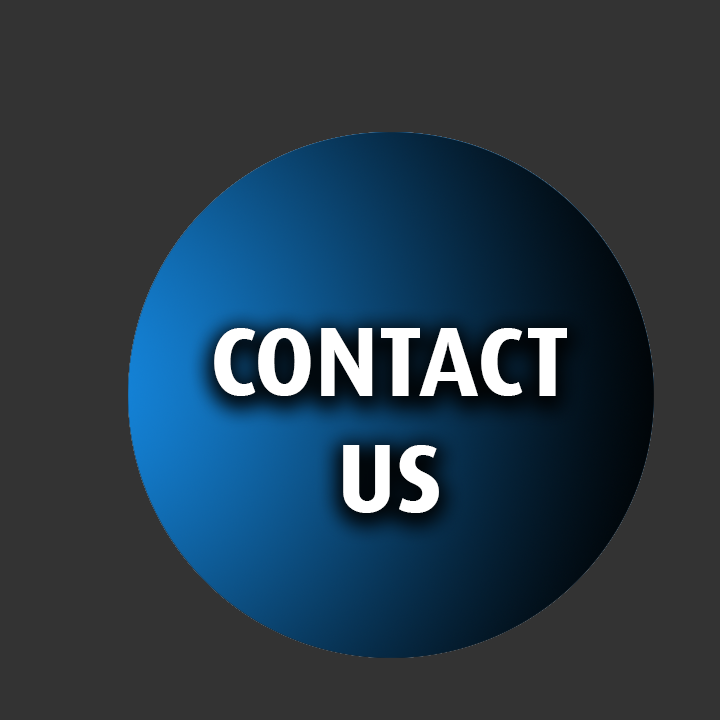
<style>
.page{position:relative;width:720px;height:720px;background:#333333}
.page>*{position:absolute;margin:0}
.t1{font:97px "DaxBold";color:#ffffff}
</style>
<div class="page">
<p class="t1" style="left:214px;top:328px;width:353px;height:185px;text-align:center">CONTACT<br>US</p>
</div>
